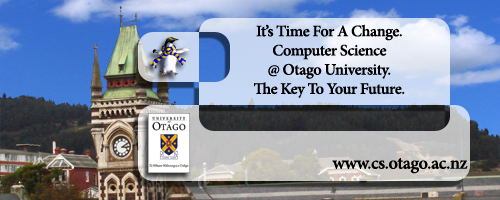
<style>
.page{position:relative;width:500px;height:200px}
.page>*{position:absolute;margin:0}
.t1{font:16px "MinionPro-Semibold";letter-spacing:-0.025em;color:#000000}
.t2{font:18px "MinionPro-Semibold";letter-spacing:-0.025em;color:#000000}
</style>
<div class="page">
<p class="t1" style="left:254px;top:24px;width:151px;height:74px;text-align:center">It’s Time For A Change.<br>Computer Science<br>@ Otago University.<br>The Key To Your Future.</p>
<p class="t2" style="left:332px;top:158px;width:136px;height:16px">www.cs.otago.ac.nz</p>
</div>
